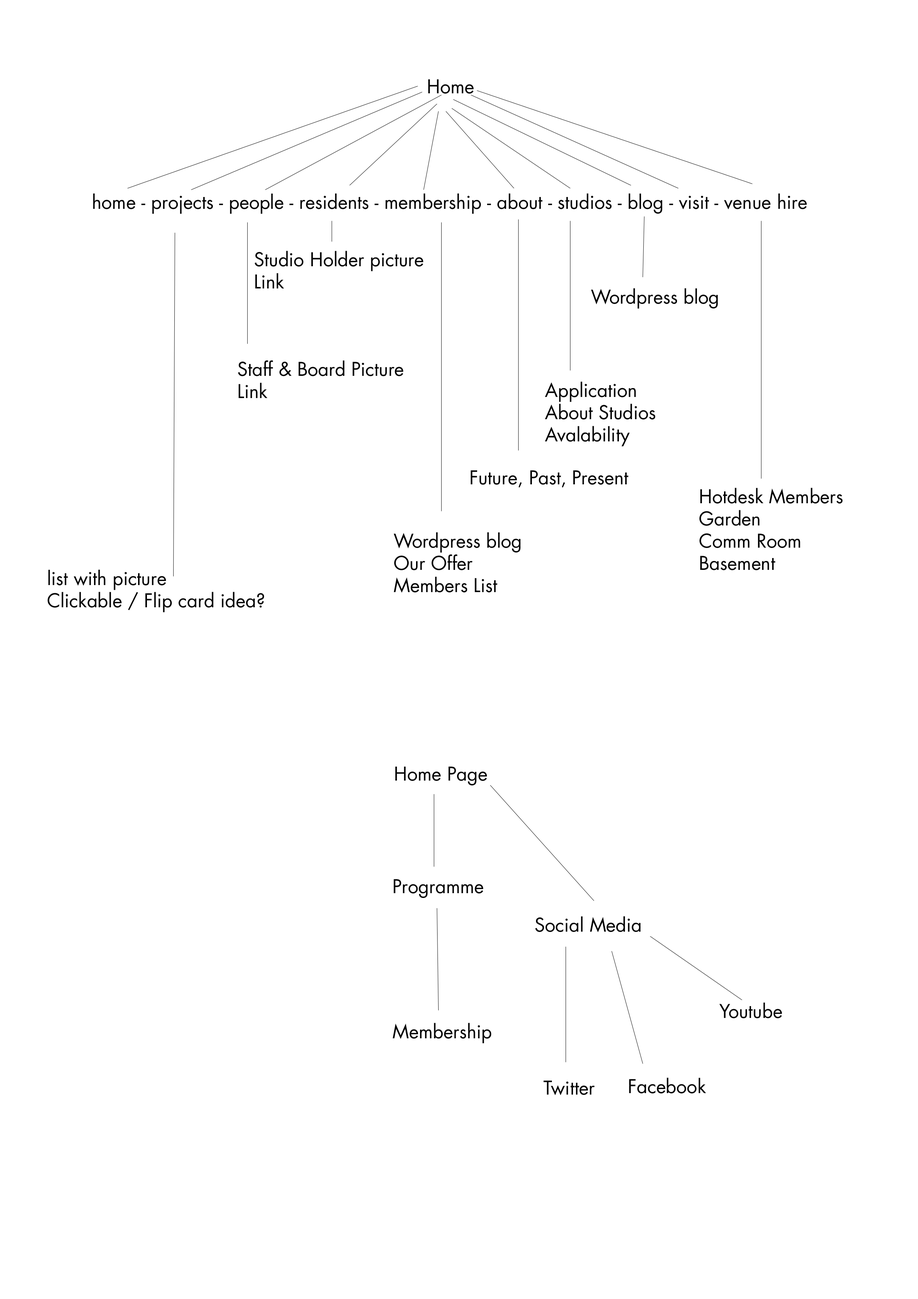
<style>
.page{position:relative;width:918px;height:1299px;background:#ffffff}
.page>*{position:absolute;margin:0}
.t1{font:18.5px "Futura-Book";color:#000000}
</style>
<div class="page">
<p class="t1" style="left:428px;top:79px;width:46px;height:15px">Home</p>
<p class="t1" style="left:93px;top:193px;width:714px;height:21px">home - projects - people - residents - membership - about - studios - blog - visit - venue hire</p>
<p class="t1" style="left:255px;top:251px;width:169px;height:37px">Studio Holder picture<br>Link</p>
<p class="t1" style="left:591px;top:288px;width:127px;height:21px">Wordpress blog</p>
<p class="t1" style="left:238px;top:360px;width:166px;height:38px">Staff &amp; Board Picture<br>Link</p>
<p class="t1" style="left:545px;top:381px;width:110px;height:65px">Application<br>About Studios<br>Avalability</p>
<p class="t1" style="left:471px;top:470px;width:158px;height:18px">Future, Past, Present</p>
<p class="t1" style="left:699px;top:488px;width:144px;height:82px">Hotdesk Members<br>Garden<br>Comm Room<br>Basement</p>
<p class="t1" style="left:394px;top:532px;width:127px;height:61px">Wordpress blog<br>Our Offer<br>Members List</p>
<p class="t1" style="left:47px;top:569px;width:217px;height:43px">list with picture<br>Clickable / Flip card idea?</p>
<p class="t1" style="left:395px;top:766px;width:92px;height:19px">Home Page</p>
<p class="t1" style="left:394px;top:879px;width:90px;height:19px">Programme</p>
<p class="t1" style="left:535px;top:916px;width:106px;height:16px">Social Media</p>
<p class="t1" style="left:719px;top:1002px;width:63px;height:16px">Youtube</p>
<p class="t1" style="left:393px;top:1023px;width:98px;height:20px">Membership</p>
<p class="t1" style="left:543px;top:1080px;width:52px;height:15px">Twitter</p>
<p class="t1" style="left:629px;top:1077px;width:77px;height:16px">Facebook</p>
</div>
